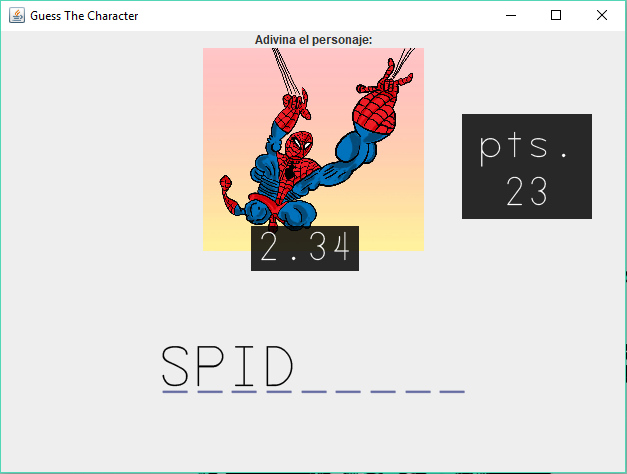
<style>
.page{position:relative;width:627px;height:474px;background:#eeeeee}
.page>*{position:absolute;margin:0}
.t1{font:40px "SecretCode";letter-spacing:0.08em;color:#ffffff}
.t2{font:56.7px "SecretCode";letter-spacing:0.08em;color:#000000}
.t3{font:56.7px "SecretCode";letter-spacing:0.08em;color:#646ca0}
.t4{font:56.7px "SecretCode";letter-spacing:0.08em;color:#737aa9}
</style>
<div class="page">
<p class="t1" style="left:481px;top:131px;width:85px;height:75px;text-align:center">pts.<br>23</p>
<p class="t1" style="left:261px;top:231px;width:88px;height:30px">2.34</p>
<p class="t2" style="left:162px;top:346px;width:131px;height:41px">SPID</p>
<p class="t3" style="left:162px;top:390px;width:303px;height:3px">_________</p>
<p class="t4" style="left:162px;top:391px;width:303px;height:3px">_________</p>
</div>
